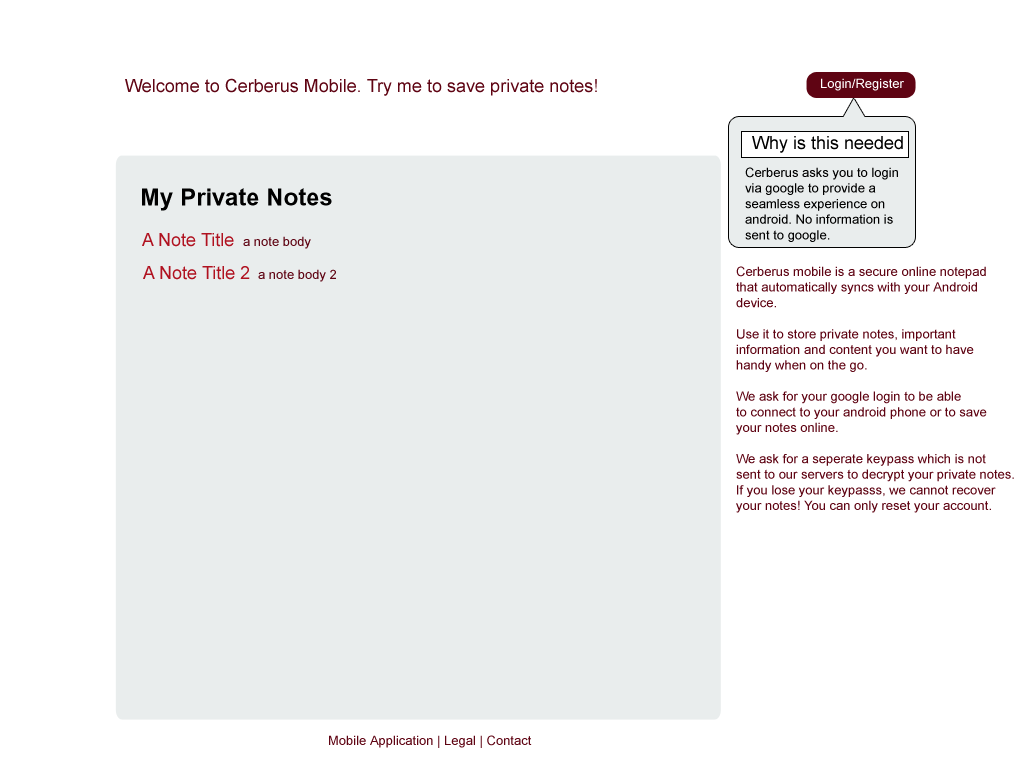
<style>
.page{position:relative;width:1024px;height:768px;background:#ffffff}
.page>*{position:absolute;margin:0}
.t1{font:18px "ArialMT";color:#5f0413}
.t2{font:13px "ArialMT";color:#ffffff}
.t3{font:18px "ArialMT";color:#000000}
.t4{font:13px "ArialMT";color:#000000}
.t5{font:24px "Arial-BoldMT";color:#000000}
.t6{font:18px "ArialMT";color:#b01220}
.t7{font:13px "ArialMT";color:#5f0413}
</style>
<div class="page">
<p class="t1" style="left:125px;top:78px;width:472px;height:18px">Welcome to Cerberus Mobile. Try me to save private notes!</p>
<p class="t2" style="left:821px;top:78px;width:83px;height:13px">Login/Register</p>
<p class="t3" style="left:752px;top:136px;width:151px;height:17px">Why is this needed</p>
<p class="t4" style="left:745px;top:167px;width:153px;height:75px">Cerberus asks you to login <br>via google to provide a <br>seamless experience on<br>android. No information is <br>sent to google.</p>
<p class="t5" style="left:142px;top:188px;width:190px;height:23px">My Private Notes</p>
<p class="t6" style="left:142px;top:233px;width:92px;height:14px">A Note Title</p>
<p class="t7" style="left:243px;top:236px;width:68px;height:13px">a note body</p>
<p class="t6" style="left:143px;top:266px;width:107px;height:14px">A Note Title 2</p>
<p class="t7" style="left:258px;top:269px;width:78px;height:13px">a note body 2</p>
<p class="t7" style="left:736px;top:266px;width:278px;height:247px">Cerberus mobile is a secure online notepad<br>that automatically syncs with your Android<br>device. <br><br>Use it to store private notes, important <br>information and content you want to have <br>handy when on the go.<br><br>We ask for your google login to be able<br>to connect to your android phone or to save<br>your notes online.<br><br>We ask for a seperate keypass which is not<br>sent to our servers to decrypt your private notes.<br>If you lose your keypasss, we cannot recover<br>your notes! You can only reset your account.</p>
<p class="t7" style="left:329px;top:735px;width:203px;height:13px">Mobile Application | Legal | Contact</p>
</div>
